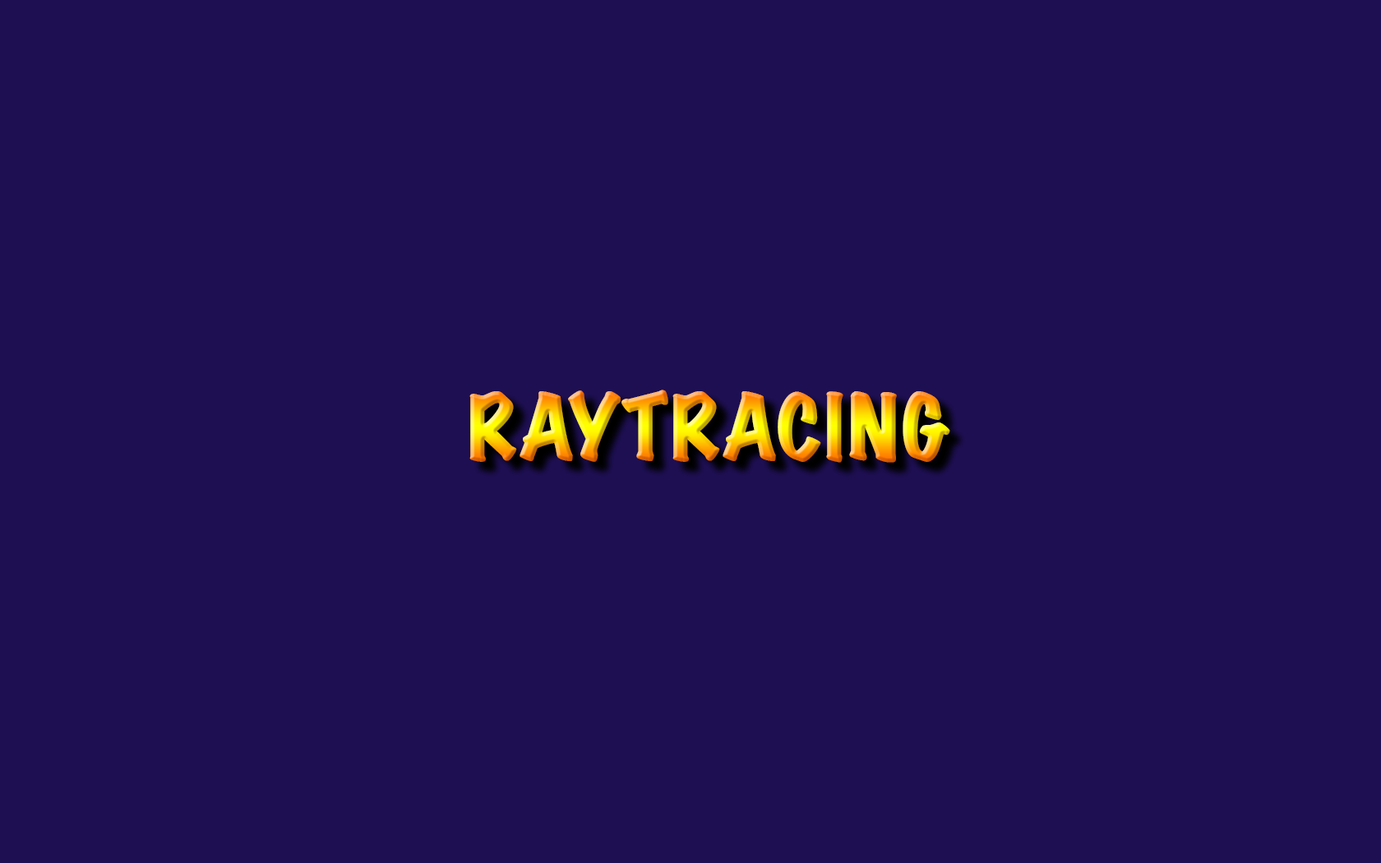
<style>
.page{position:relative;width:1381px;height:863px;background:#1e0f53}
.page>*{position:absolute;margin:0}
.t1{font:82.2px "MarkerFelt-Wide"}
</style>
<div class="page">
<p class="t1" style="left:469px;top:390px;width:481px;height:73px">RAYTRACING</p>
</div>
